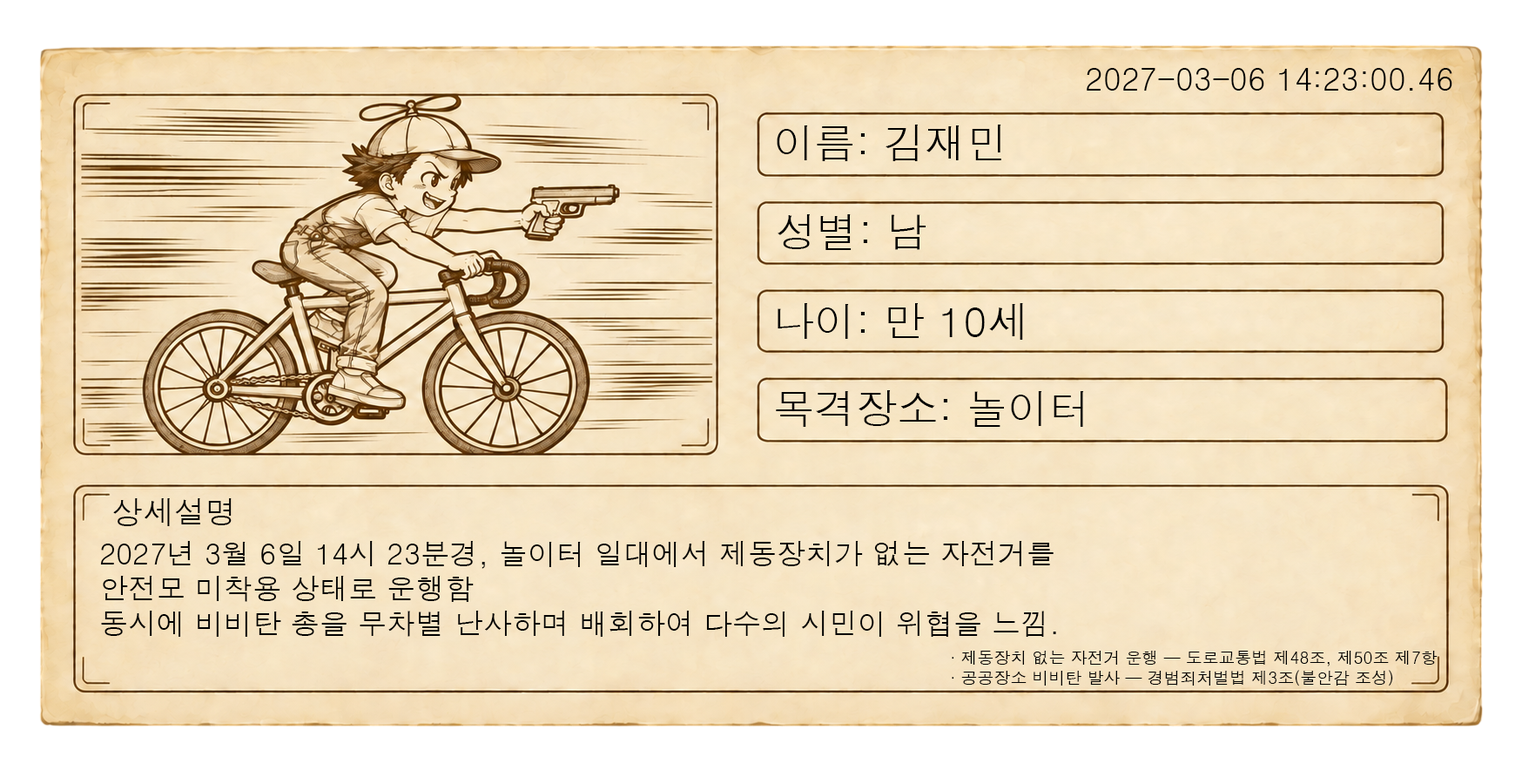
<style>
.page{position:relative;width:1522px;height:784px}
.page>*{position:absolute;margin:0}
.t1{font:31px "Dotum";color:#000000}
.t2{font:41.4px "Dotum";color:#000000}
.t3{font:31.3px "Dotum";color:#000000}
.t4{font:28.8px "Dotum";color:#000000}
.t5{font:16.4px "Dotum";color:#000000}
</style>
<div class="page">
<p class="t1" style="left:1087px;top:68px;width:365px;height:23px">2027-03-06 14:23:00.46</p>
<p class="t2" style="left:777px;top:124px;width:224px;height:37px">이름: 김재민</p>
<p class="t2" style="left:777px;top:214px;width:148px;height:36px">성별: 남</p>
<p class="t2" style="left:777px;top:303px;width:246px;height:37px">나이: 만 10세</p>
<p class="t2" style="left:776px;top:390px;width:308px;height:37px">목격장소: 놀이터</p>
<p class="t3" style="left:113px;top:498px;width:119px;height:28px">상세설명</p>
<p class="t4" style="left:100px;top:541px;width:956px;height:95px">2027년 3월 6일 14시 23분경, 놀이터 일대에서 제동장치가 없는 자전거를<br>안전모 미착용 상태로 운행함 <br>동시에 비비탄 총을 무차별 난사하며 배회하여 다수의 시민이 위협을 느낌.</p>
<p class="t5" style="left:952px;top:650px;width:485px;height:36px">· 제동장치 없는 자전거 운행 — 도로교통법 제48조, 제50조 제7항<br>· 공공장소 비비탄 발사 — 경범죄처벌법 제3조(불안감 조성)</p>
</div>
